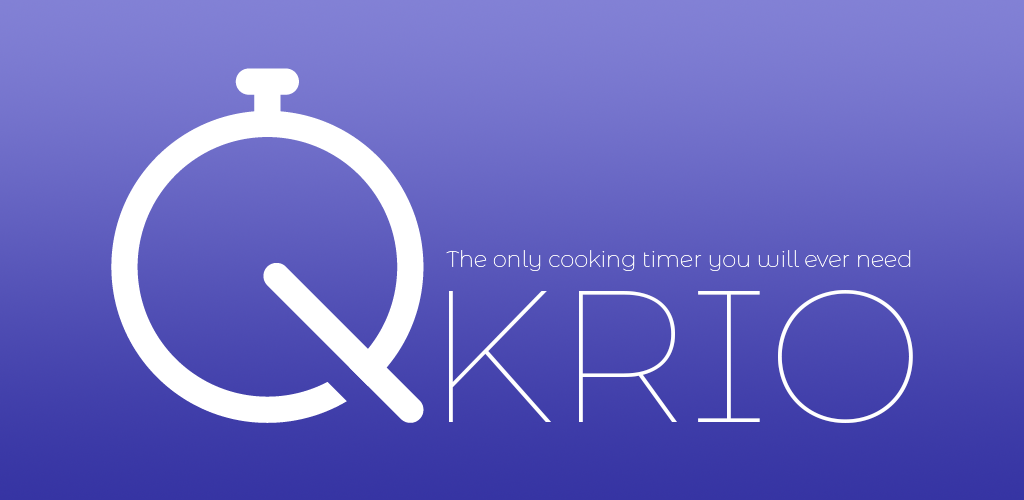
<style>
.page{position:relative;width:1024px;height:500px}
.page>*{position:absolute;margin:0}
.t1{font:22.5px "MontserratAlternates-Thin";color:#ffffff}
.t2{font:187.5px "MontserratAlternates-Thin";color:#ffffff}
</style>
<div class="page">
<p class="t1" style="left:446px;top:250px;width:465px;height:21px">The only cooking timer you will ever need</p>
<p class="t2" style="left:449px;top:290px;width:464px;height:133px">KRIO</p>
</div>
